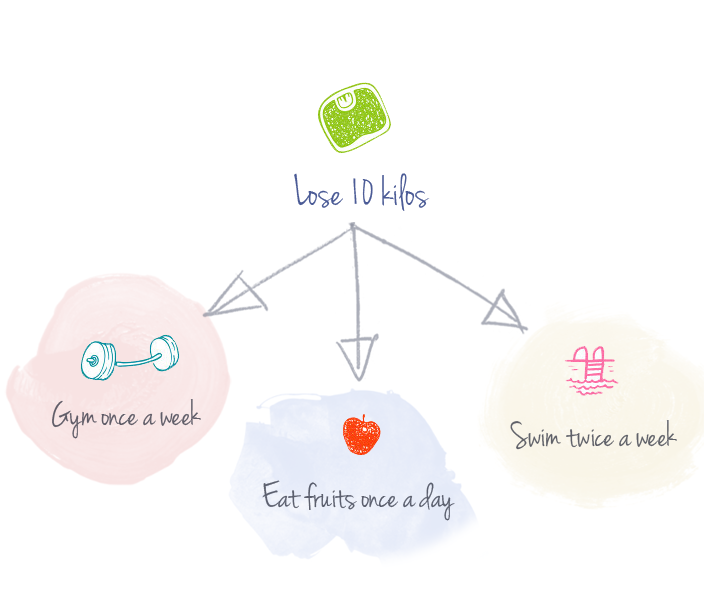
<style>
.page{position:relative;width:718px;height:591px;background:#ffffff}
.page>*{position:absolute;margin:0}
.t1{font:44.7px "JennaSue";color:#4b5b96}
.t2{font:37.5px "JennaSue";color:#5f5c68}
.t3{font:37.5px "JennaSue";color:#5f6169}
.t4{font:37.5px "JennaSue";color:#5b5f6e}
</style>
<div class="page">
<p class="t1" style="left:294px;top:173px;width:136px;height:38px">Lose 10 kilos</p>
<p class="t2" style="left:52px;top:399px;width:149px;height:40px">Gym once a week</p>
<p class="t3" style="left:510px;top:420px;width:167px;height:30px">Swim twice a week</p>
<p class="t4" style="left:262px;top:480px;width:193px;height:41px">Eat fruits once a day</p>
</div>
